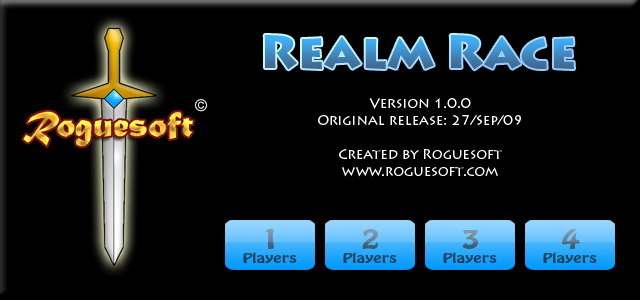
<style>
.page{position:relative;width:640px;height:300px;background:#000000}
.page>*{position:absolute;margin:0}
.t1{font:48px "LithosPro-Black"}
.t2{font:14px "LithosPro-Regular";color:#ffffff}
</style>
<div class="page">
<p class="t1" style="left:264px;top:35px;width:310px;height:35px">Realm Race</p>
<p class="t2" style="left:318px;top:98px;width:203px;height:79px;text-align:center">Version 1.0.0<br>Original release: 27/Sep/09<br><br>Created by Roguesoft<br>www.roguesoft.com</p>
</div>
